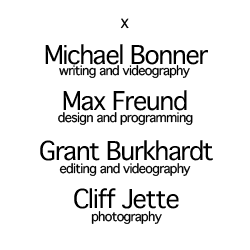
<style>
.page{position:relative;width:250px;height:250px;background:#ffffff}
.page>*{position:absolute;margin:0}
.t1{font:16.7px "Thonburi";letter-spacing:-0.05em;color:#000000}
.t2{font:25px "Thonburi";letter-spacing:-0.05em;color:#000000}
.t3{font:12.5px "Thonburi";letter-spacing:-0.05em;color:#000000}
</style>
<div class="page">
<p class="t1" style="left:120px;top:18px;width:9px;height:11px">x</p>
<p class="t2" style="left:45px;top:44px;width:163px;height:21px">Michael Bonner</p>
<p class="t3" style="left:59px;top:65px;width:131px;height:13px">writing and videography</p>
<p class="t2" style="left:63px;top:90px;width:124px;height:21px">Max Freund</p>
<p class="t3" style="left:58px;top:112px;width:135px;height:13px">design and programming</p>
<p class="t2" style="left:40px;top:140px;width:173px;height:21px">Grant Burkhardt</p>
<p class="t3" style="left:59px;top:163px;width:132px;height:13px">editing and videography</p>
<p class="t2" style="left:74px;top:188px;width:105px;height:21px">Cliff Jette</p>
<p class="t3" style="left:91px;top:211px;width:71px;height:13px">photography</p>
</div>
